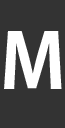
<style>
.page{position:relative;width:65px;height:128px;background:#333333}
.page>*{position:absolute;margin:0}
.t1{font:75px "AdobeGothicStd-Bold";color:#ffffff}
</style>
<div class="page">
<p class="t1" style="left:4px;top:31px;width:58px;height:58px">M</p>
</div>
